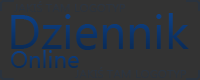
<style>
.page{position:relative;width:200px;height:80px;background:#333333}
.page>*{position:absolute;margin:0}
.t1{font:12px "Ebrima";color:#2b333d}
.t2{font:48px "Ebrima";color:#0b346a}
.t3{font:24px "Ebrima";color:#0b346b}
</style>
<div class="page">
<p class="t1" style="left:14px;top:1px;width:112px;height:11px">JAKIŚ TAM LOGOTYP</p>
<p class="t2" style="left:11px;top:13px;width:178px;height:37px">Dziennik</p>
<p class="t3" style="left:11px;top:50px;width:68px;height:18px">Online</p>
<p class="t1" style="left:75px;top:67px;width:112px;height:11px">JAKIŚ TAM LOGOTYP</p>
</div>
